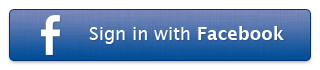
<style>
.page{position:relative;width:320px;height:70px;background:#ffffff}
.page>*{position:absolute;margin:0}
.t1{font:18px "LucidaGrande";color:#ffffff}
.t2{font:18px "LucidaGrande-Bold";color:#ffffff}
</style>
<div class="page">
<p class="t1" style="left:89px;top:26px;width:195px;height:18px">Sign in with <span class="t2">Facebook</span></p>
</div>
